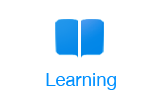
<style>
.page{position:relative;width:160px;height:98px;background:#ffffff}
.page>*{position:absolute;margin:0}
.t1{font:18.5px "HelveticaNeue";color:#0090ff}
</style>
<div class="page">
<p class="t1" style="left:46px;top:73px;width:70px;height:17px">Learning</p>
</div>
